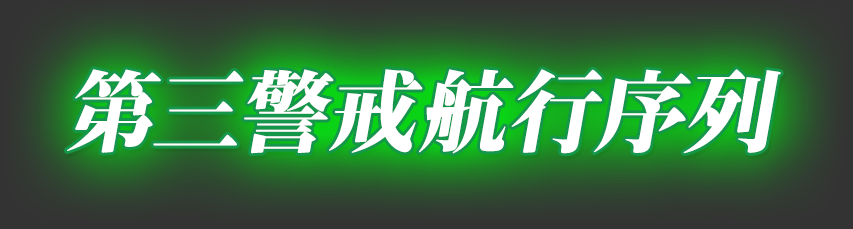
<style>
.page{position:relative;width:853px;height:229px}
.page>*{position:absolute;margin:0}
.t1{font:89px "KochoStd-Heavy";letter-spacing:0.015em;color:#ffffff;font-weight:bold;font-style:italic}
</style>
<div class="page">
<p class="t1" style="left:67px;top:69px;width:714px;height:85px">第三警戒航行序列</p>
</div>
